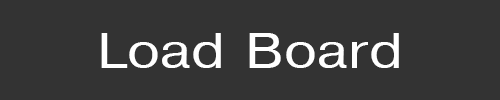
<style>
.page{position:relative;width:500px;height:100px;background:#333333}
.page>*{position:absolute;margin:0}
.t1{font:48px "Helvetica";color:#ffffff;scale:1.2 1}
</style>
<div class="page">
<p class="t1" style="left:101px;top:33px;width:298px;height:35px">Load Board</p>
</div>
